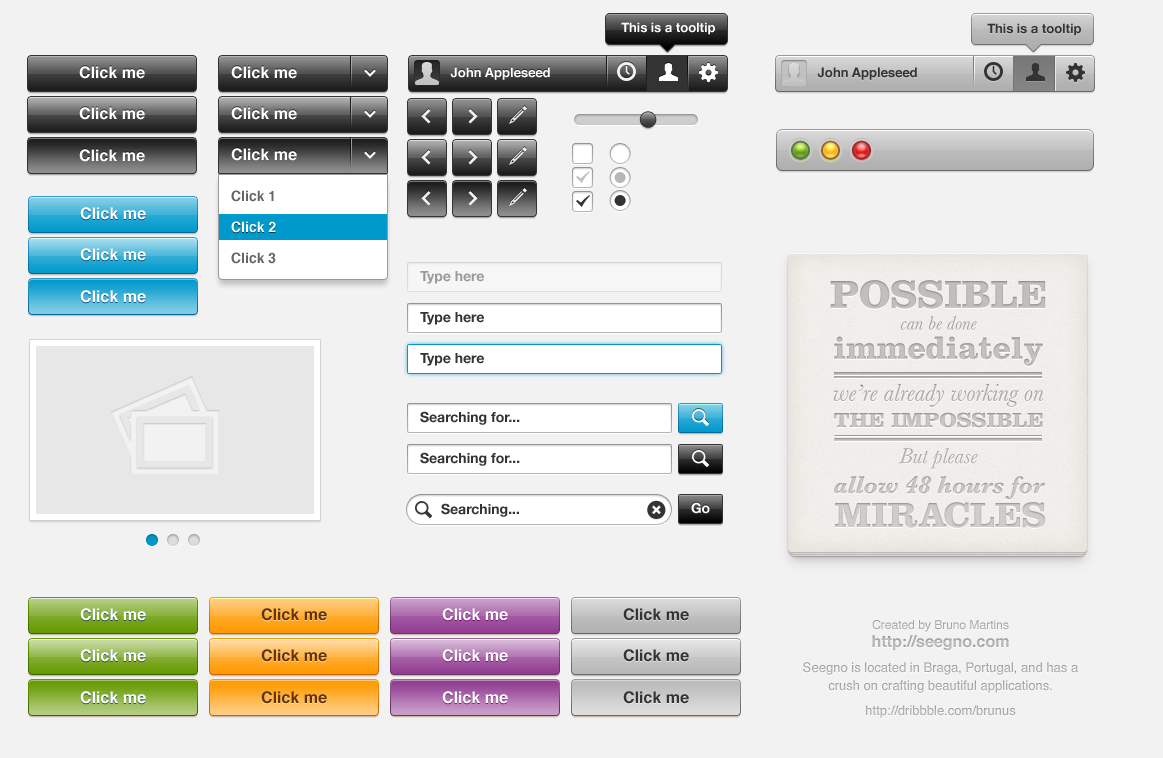
<style>
.page{position:relative;width:1163px;height:758px;background:#f2f2f2}
.page>*{position:absolute;margin:0}
.t1{font:13px "HelveticaNeue-Bold";color:#ffffff}
.t2{font:13px "HelveticaNeue-Bold";color:#333333}
.t3{font:16px "Helvetica-Bold";color:#ffffff}
.t4{font:13px "Helvetica-Bold";color:#ffffff}
.t5{font:13px "Helvetica-Bold";color:#333333}
.t6{font:14px "Helvetica-Bold";color:#666666}
.t7{font:14px "Helvetica-Bold";color:#ffffff}
.t8{font:14px "HelveticaNeue-Bold";color:#999999}
.t9{font:14px "HelveticaNeue-Bold";color:#333333}
.t10{font:14px "HelveticaNeue-Bold";color:#ffffff}
.t11{font:16px "Helvetica-Bold";color:#663300}
.t12{font:16px "Helvetica-Bold";color:#333333}
.t13{font:13px/18px "Helvetica";color:#ababab}
.t14{font:12px "Helvetica";color:#ababab}
.t15{font:16px/12px "Helvetica-Bold";color:#ababab}
</style>
<div class="page">
<p class="t1" style="left:621px;top:22px;width:94px;height:13px">This is a tooltip</p>
<p class="t2" style="left:987px;top:23px;width:94px;height:13px">This is a tooltip</p>
<p class="t3" style="left:79px;top:66px;width:66px;height:13px">Click me</p>
<p class="t3" style="left:231px;top:66px;width:66px;height:13px">Click me</p>
<p class="t4" style="left:450px;top:67px;width:100px;height:13px">John Appleseed</p>
<p class="t5" style="left:817px;top:67px;width:100px;height:13px">John Appleseed</p>
<p class="t3" style="left:79px;top:107px;width:66px;height:13px">Click me</p>
<p class="t3" style="left:231px;top:107px;width:66px;height:13px">Click me</p>
<p class="t3" style="left:79px;top:149px;width:66px;height:13px">Click me</p>
<p class="t3" style="left:231px;top:148px;width:66px;height:13px">Click me</p>
<p class="t6" style="left:231px;top:190px;width:43px;height:12px">Click 1</p>
<p class="t3" style="left:80px;top:207px;width:66px;height:13px">Click me</p>
<p class="t7" style="left:231px;top:221px;width:45px;height:12px">Click 2</p>
<p class="t3" style="left:80px;top:248px;width:66px;height:13px">Click me</p>
<p class="t6" style="left:231px;top:252px;width:45px;height:12px">Click 3</p>
<p class="t8" style="left:420px;top:271px;width:64px;height:13px">Type here</p>
<p class="t3" style="left:80px;top:290px;width:66px;height:13px">Click me</p>
<p class="t9" style="left:420px;top:312px;width:64px;height:13px">Type here</p>
<p class="t9" style="left:420px;top:353px;width:64px;height:13px">Type here</p>
<p class="t9" style="left:420px;top:411px;width:100px;height:14px">Searching for...</p>
<p class="t9" style="left:420px;top:452px;width:100px;height:14px">Searching for...</p>
<p class="t9" style="left:441px;top:503px;width:78px;height:14px">Searching...</p>
<p class="t10" style="left:691px;top:502px;width:19px;height:12px">Go</p>
<p class="t3" style="left:80px;top:608px;width:66px;height:13px">Click me</p>
<p class="t11" style="left:261px;top:608px;width:66px;height:13px">Click me</p>
<p class="t3" style="left:442px;top:608px;width:66px;height:13px">Click me</p>
<p class="t12" style="left:623px;top:608px;width:66px;height:13px">Click me</p>
<p class="t13" style="left:803px;top:620px;width:275px;height:98px;text-align:center"><span class="t14">Created by Bruno Martins <br></span><span class="t15">http://seegno.com<br></span>Seegno is located in Braga, Portugal, and has a crush on crafting beautiful applications.<br>http://dribbble.com/brunus</p>
<p class="t3" style="left:80px;top:649px;width:66px;height:13px">Click me</p>
<p class="t11" style="left:261px;top:649px;width:66px;height:13px">Click me</p>
<p class="t3" style="left:442px;top:649px;width:66px;height:13px">Click me</p>
<p class="t12" style="left:623px;top:649px;width:66px;height:13px">Click me</p>
<p class="t3" style="left:80px;top:691px;width:66px;height:13px">Click me</p>
<p class="t11" style="left:261px;top:691px;width:66px;height:13px">Click me</p>
<p class="t3" style="left:442px;top:691px;width:66px;height:13px">Click me</p>
<p class="t12" style="left:623px;top:691px;width:66px;height:13px">Click me</p>
</div>
